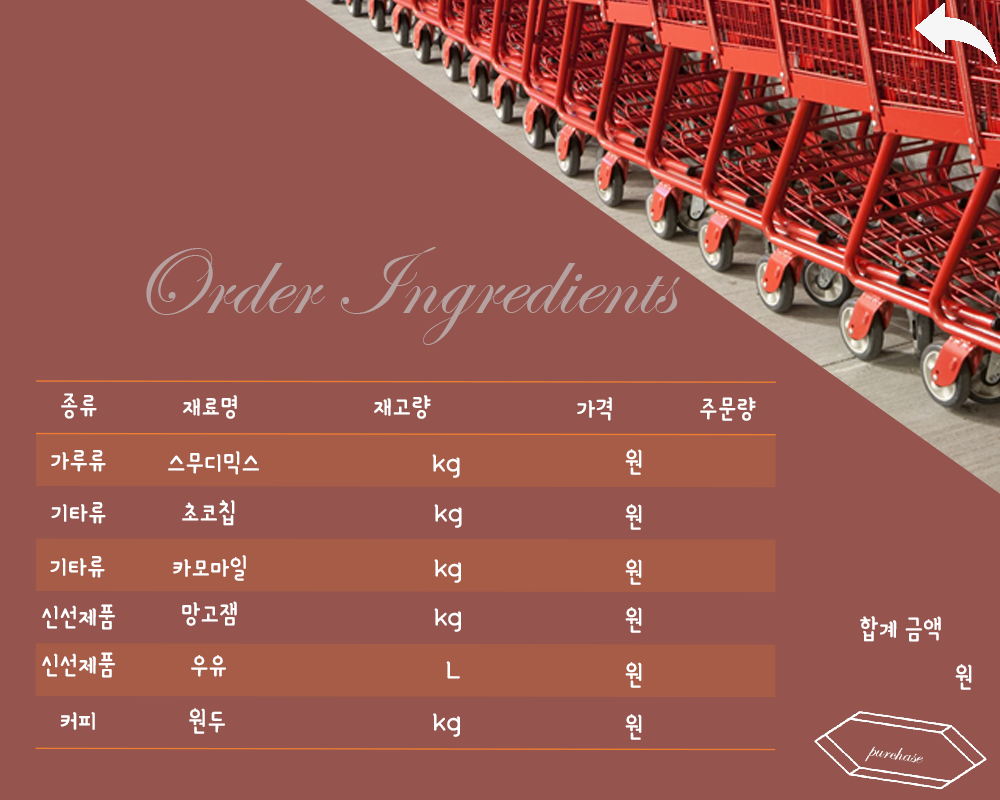
<style>
.page{position:relative;width:1000px;height:800px;background:#95544d}
.page>*{position:absolute;margin:0}
.t1{font:100px "EdwardianScriptITC";color:#b5a2a0}
.t2{font:30px "YanoljaYacheR";color:#ffffff}
</style>
<div class="page">
<p class="t1" style="left:146px;top:247px;width:534px;height:98px">Order Ingredients</p>
<p class="t2" style="left:61px;top:393px;width:36px;height:26px">종류</p>
<p class="t2" style="left:183px;top:395px;width:54px;height:24px">재료명</p>
<p class="t2" style="left:374px;top:395px;width:57px;height:24px">재고량</p>
<p class="t2" style="left:577px;top:397px;width:35px;height:24px">가격</p>
<p class="t2" style="left:700px;top:397px;width:56px;height:24px">주문량</p>
<p class="t2" style="left:625px;top:449px;width:17px;height:26px">원</p>
<p class="t2" style="left:51px;top:450px;width:55px;height:22px">가루류</p>
<p class="t2" style="left:168px;top:451px;width:91px;height:24px">스무디믹스</p>
<p class="t2" style="left:432px;top:454px;width:28px;height:24px">kg</p>
<p class="t2" style="left:51px;top:502px;width:55px;height:22px">기타류</p>
<p class="t2" style="left:182px;top:500px;width:53px;height:26px">초코칩</p>
<p class="t2" style="left:434px;top:504px;width:28px;height:24px">kg</p>
<p class="t2" style="left:625px;top:504px;width:17px;height:26px">원</p>
<p class="t2" style="left:50px;top:556px;width:55px;height:22px">기타류</p>
<p class="t2" style="left:173px;top:555px;width:73px;height:26px">카모마일</p>
<p class="t2" style="left:434px;top:559px;width:27px;height:24px">kg</p>
<p class="t2" style="left:625px;top:559px;width:17px;height:26px">원</p>
<p class="t2" style="left:42px;top:604px;width:73px;height:26px">신선제품</p>
<p class="t2" style="left:182px;top:601px;width:55px;height:25px">망고잼</p>
<p class="t2" style="left:434px;top:608px;width:27px;height:24px">kg</p>
<p class="t2" style="left:625px;top:607px;width:17px;height:26px">원</p>
<p class="t2" style="left:860px;top:616px;width:81px;height:26px">합계 금액</p>
<p class="t2" style="left:42px;top:652px;width:73px;height:26px">신선제품</p>
<p class="t2" style="left:191px;top:655px;width:35px;height:22px">우유</p>
<p class="t2" style="left:446px;top:661px;width:14px;height:18px">L</p>
<p class="t2" style="left:625px;top:662px;width:17px;height:26px">원</p>
<p class="t2" style="left:955px;top:664px;width:17px;height:26px">원</p>
<p class="t2" style="left:60px;top:712px;width:35px;height:18px">커피</p>
<p class="t2" style="left:189px;top:708px;width:36px;height:26px">원두</p>
<p class="t2" style="left:433px;top:713px;width:27px;height:24px">kg</p>
<p class="t2" style="left:625px;top:714px;width:17px;height:26px">원</p>
</div>
